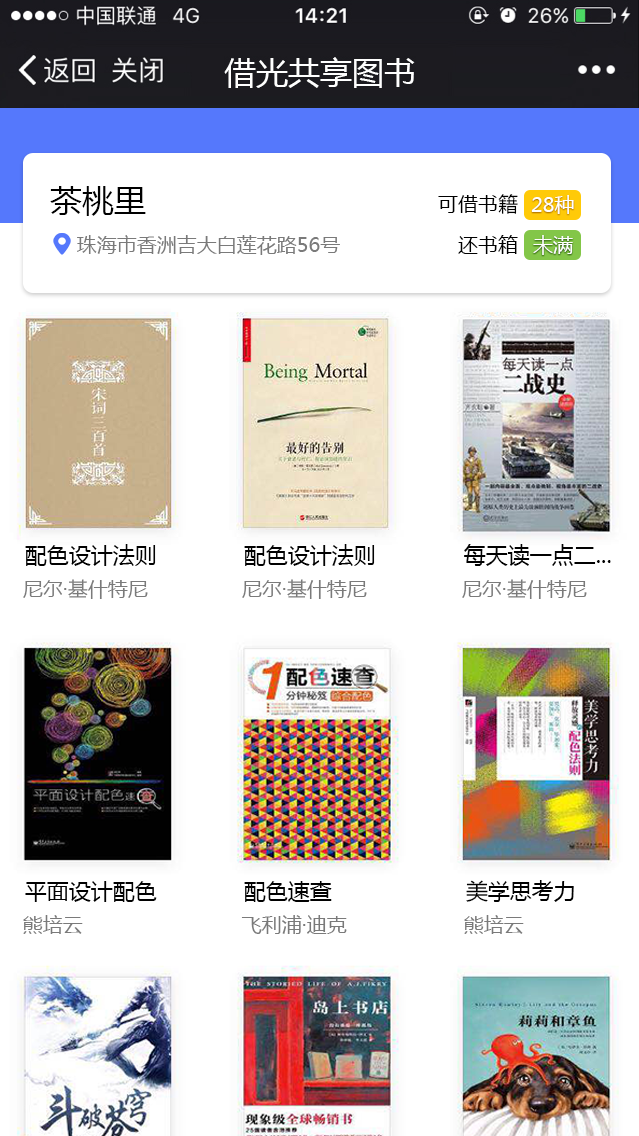
<style>
.page{position:relative;width:639px;height:1136px;background:#ffffff}
.page>*{position:absolute;margin:0}
.t1{font:32px "MicrosoftYaHei";color:#000000}
.t2{font:20px "MicrosoftYaHei";color:#000000}
.t3{font:20px "MicrosoftYaHei";color:#ffffff}
.t4{font:20px "MicrosoftYaHei";color:#7a7a7a}
.t5{font:22px "MicrosoftYaHei";color:#010101}
</style>
<div class="page">
<p class="t1" style="left:50px;top:186px;width:96px;height:30px">茶桃里</p>
<p class="t2" style="left:438px;top:194px;width:80px;height:20px">可借书籍</p>
<p class="t3" style="left:531px;top:195px;width:43px;height:19px">28种</p>
<p class="t4" style="left:77px;top:235px;width:263px;height:20px">珠海市香洲吉大白莲花路56号</p>
<p class="t2" style="left:458px;top:235px;width:60px;height:19px">还书箱</p>
<p class="t3" style="left:533px;top:235px;width:40px;height:20px">未满</p>
<p class="t5" style="left:25px;top:544px;width:131px;height:22px">配色设计法则</p>
<p class="t5" style="left:244px;top:544px;width:131px;height:22px">配色设计法则</p>
<p class="t5" style="left:464px;top:544px;width:147px;height:22px">每天读一点二...</p>
<p class="t4" style="left:23px;top:579px;width:125px;height:20px">尼尔·基什特尼</p>
<p class="t4" style="left:242px;top:579px;width:125px;height:20px">尼尔·基什特尼</p>
<p class="t4" style="left:462px;top:579px;width:125px;height:20px">尼尔·基什特尼</p>
<p class="t5" style="left:25px;top:881px;width:132px;height:21px">平面设计配色</p>
<p class="t5" style="left:244px;top:881px;width:88px;height:21px">配色速查</p>
<p class="t5" style="left:466px;top:880px;width:108px;height:22px">美学思考力</p>
<p class="t4" style="left:23px;top:915px;width:60px;height:19px">熊培云</p>
<p class="t4" style="left:241px;top:915px;width:106px;height:19px">飞利浦·迪克</p>
<p class="t4" style="left:464px;top:915px;width:60px;height:19px">熊培云</p>
</div>
